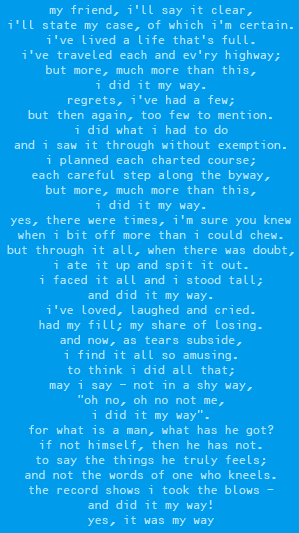
<style>
.page{position:relative;width:299px;height:533px;background:#009beb}
.page>*{position:absolute;margin:0}
.t1{font:14px/16px "OCRB10PitchBT-Regular";letter-spacing:-0.1em;color:#aae2ff}
</style>
<div class="page">
<p class="t1" style="left:7px;top:5px;width:287px;height:521px;text-align:center">my friend, i'll say it clear,<br>i'll state my case, of which i'm certain.<br>i've lived a life that's full.<br>i've traveled each and ev'ry highway;<br>but more, much more than this,<br>i did it my way.<br>regrets, i've had a few;<br>but then again, too few to mention.<br>i did what i had to do<br>and i saw it through without exemption.<br>i planned each charted course;<br>each careful step along the byway,<br>but more, much more than this,<br>i did it my way.<br>yes, there were times, i'm sure you knew<br>when i bit off more than i could chew.<br>but through it all, when there was doubt,<br>i ate it up and spit it out.<br>i faced it all and i stood tall;<br>and did it my way.<br>i've loved, laughed and cried.<br>had my fill; my share of losing.<br>and now, as tears subside,<br>i find it all so amusing.<br>to think i did all that;<br>may i say - not in a shy way,<br>"oh no, oh no not me,<br>i did it my way".<br>for what is a man, what has he got?<br>if not himself, then he has not.<br>to say the things he truly feels;<br>and not the words of one who kneels.<br>the record shows i took the blows -<br>and did it my way!<br>yes, it was my way</p>
</div>
